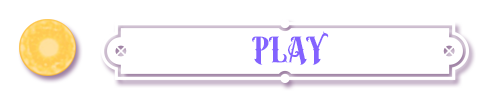
<style>
.page{position:relative;width:484px;height:106px;background:#ffffff}
.page>*{position:absolute;margin:0}
.t1{font:41.7px "Moyers";color:#8362ff}
</style>
<div class="page">
<p class="t1" style="left:252px;top:31px;width:77px;height:34px">PLAY</p>
</div>
